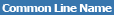
<style>
.page{position:relative;width:114px;height:15px;background:#3776ae}
.page>*{position:absolute;margin:0}
.t1{font:11px "Verdana-Bold";letter-spacing:-0.08em;color:#ffffff}
</style>
<div class="page">
<p class="t1" style="left:2px;top:4px;width:110px;height:8px">Common Line Name</p>
</div>
